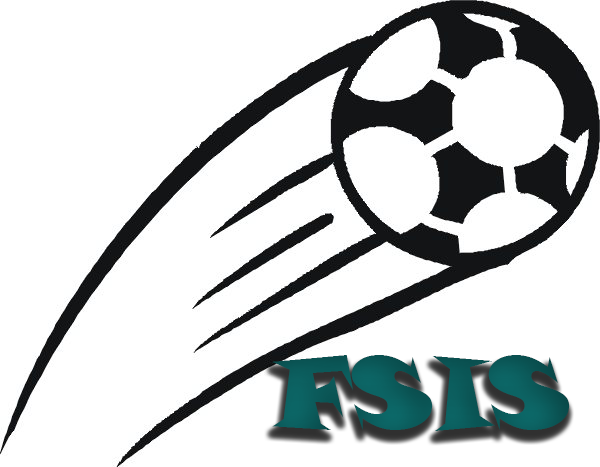
<style>
.page{position:relative;width:600px;height:467px;background:#ffffff}
.page>*{position:absolute;margin:0}
.t1{font:100px "SnapITC-Regular";color:#0b5c5c}
</style>
<div class="page">
<p class="t1" style="left:272px;top:355px;width:298px;height:76px">FSIS</p>
</div>
